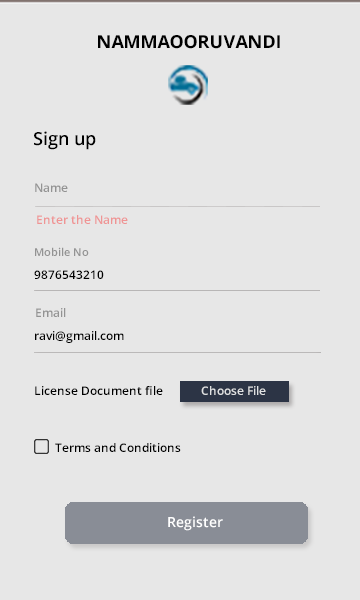
<style>
.page{position:relative;width:360px;height:600px;background:#e7e7e7}
.page>*{position:absolute;margin:0}
.t1{font:18px "OpenSans-Bold";color:#000000}
.t2{font:18px "OpenSans-Semibold";color:#000000}
.t3{font:12px "OpenSans-Semibold";color:#939393}
.t4{font:12px "OpenSans-Semibold";color:#ef9494}
.t5{font:11px "OpenSans-Semibold";color:#939393}
.t6{font:12px "OpenSans-Semibold";color:#000000}
.t7{font:12px "OpenSans-Semibold";color:#e0e1e2}
.t8{font:14px "OpenSans-Semibold";color:#ffffff}
</style>
<div class="page">
<p class="t1" style="left:98px;top:35px;width:182px;height:14px"><span class="t2">     </span>  NAMMAOORUVANDI</p>
<p class="t2" style="left:34px;top:131px;width:62px;height:19px">Sign up</p>
<p class="t3" style="left:35px;top:183px;width:33px;height:9px">Name</p>
<p class="t4" style="left:37px;top:215px;width:91px;height:9px">Enter the Name</p>
<p class="t5" style="left:35px;top:247px;width:54px;height:9px">Mobile No</p>
<p class="t6" style="left:34px;top:270px;width:70px;height:9px">9876543210</p>
<p class="t3" style="left:36px;top:308px;width:30px;height:9px">Email</p>
<p class="t6" style="left:35px;top:331px;width:89px;height:12px">ravi@gmail.com</p>
<p class="t6" style="left:35px;top:386px;width:128px;height:9px">License Document file</p>
<p class="t7" style="left:201px;top:386px;width:65px;height:9px">Choose File</p>
<p class="t6" style="left:55px;top:443px;width:126px;height:9px">Terms and Conditions</p>
<p class="t8" style="left:168px;top:516px;width:55px;height:15px">Register</p>
</div>
